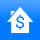
<style>
.page{position:relative;width:40px;height:40px;background:#007aff}
.page>*{position:absolute;margin:0}
.t1{font:15.7px "Roboto-Regular";color:#007aff;scale:1.15 1}
</style>
<div class="page">
<p class="t1" style="left:16px;top:14px;width:9px;height:16px">$</p>
</div>
